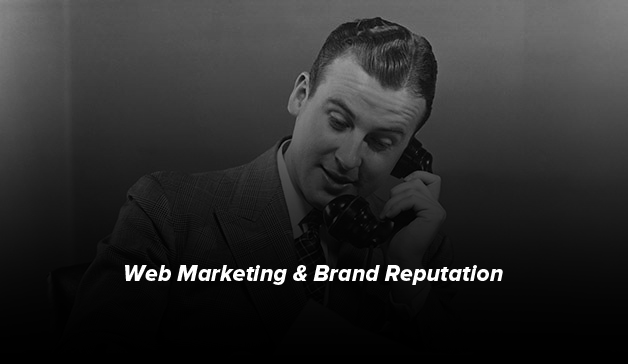
<style>
.page{position:relative;width:628px;height:364px}
.page>*{position:absolute;margin:0}
.t1{font:23.1px "ProximaNova-ExtrabldIt";color:#ffffff}
</style>
<div class="page">
<p class="t1" style="left:125px;top:265px;width:378px;height:20px">Web Marketing &amp; Brand Reputation</p>
</div>
